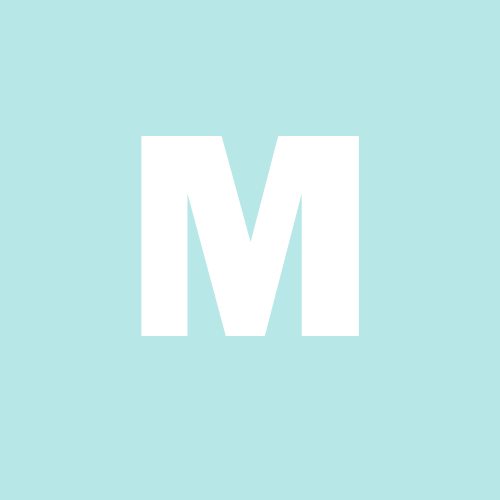
<style>
.page{position:relative;width:500px;height:500px;background:#b7e7e7}
.page>*{position:absolute;margin:0}
.t1{font:300px "FranklinGothic-Heavy";color:#ffffff}
</style>
<div class="page">
<p class="t1" style="left:141px;top:136px;width:218px;height:200px">M</p>
</div>
